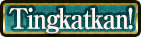
<style>
.page{position:relative;width:141px;height:37px}
.page>*{position:absolute;margin:0}
.t1{font:28px "RyuminPro-ExBold";letter-spacing:-0.08em;color:#fff6f2;scale:0.9 1}
</style>
<div class="page">
<p class="t1" style="left:9px;top:7px;width:124px;height:27px">Tingkatkan!</p>
</div>
